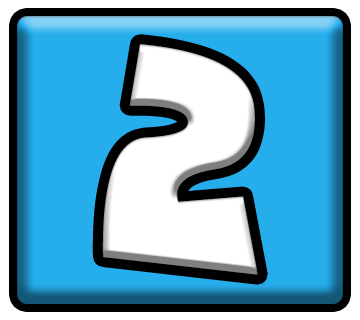
<style>
.page{position:relative;width:360px;height:320px;background:#26adec}
.page>*{position:absolute;margin:0}
.t1{font:277.9px "Funhouse";color:#ffffff;scale:0.91 1}
</style>
<div class="page">
<p class="t1" style="left:102px;top:44px;width:156px;height:231px">2</p>
</div>
